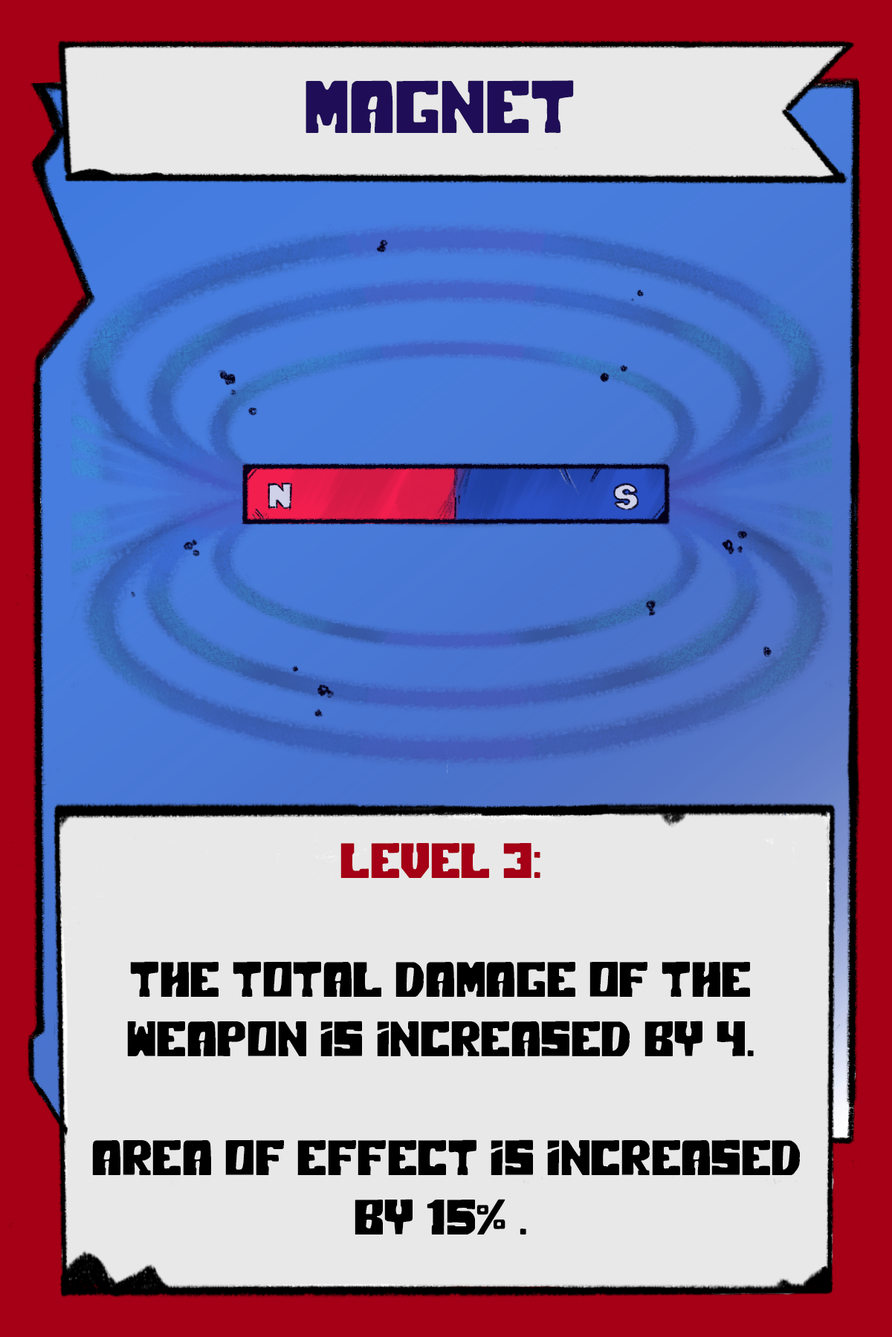
<style>
.page{position:relative;width:892px;height:1337px;background:#e8e8e8}
.page>*{position:absolute;margin:0}
.t1{font:74.3px "PolarPress";color:#1f0e57}
.t2{font:49.5px "PolarPress";color:#000000}
.t3{font:49.5px "PolarPress";color:#a50015}
</style>
<div class="page">
<p class="t1" style="left:305px;top:80px;width:269px;height:53px">MAGNET</p>
<p class="t2" style="left:92px;top:843px;width:707px;height:393px;text-align:center"><span class="t3">LEVEL 3:<br><br></span>The total damage of the weapon is increased by 4.<br> <br> Area Of Effect is increased by 15% .</p>
</div>
